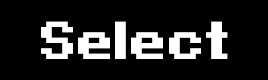
<style>
.page{position:relative;width:268px;height:80px;background:#000000}
.page>*{position:absolute;margin:0}
.t1{font:48px "PixeloidSans-Bold";color:#ffffff}
</style>
<div class="page">
<p class="t1" style="left:41px;top:21px;width:187px;height:38px">Select</p>
</div>
